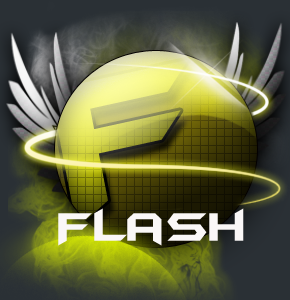
<style>
.page{position:relative;width:290px;height:300px}
.page>*{position:absolute;margin:0}
.t1{font:203.7px "BatmanForeverAlternate"}
.t2{font:46.7px "BatmanForeverAlternate";color:#faf7f7}
</style>
<div class="page">
<p class="t1" style="left:50px;top:59px;width:139px;height:170px;rotate:-12deg">F</p>
<p class="t2" style="left:58px;top:208px;width:186px;height:38px">Flash</p>
</div>
